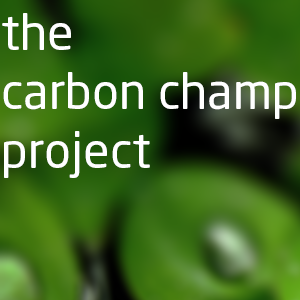
<style>
.page{position:relative;width:300px;height:300px}
.page>*{position:absolute;margin:0}
.t1{font:49px "NeoSans";color:#ffffff}
</style>
<div class="page">
<p class="t1" style="left:2px;top:13px;width:294px;height:165px">the<br>carbon champ<br>project</p>
</div>
